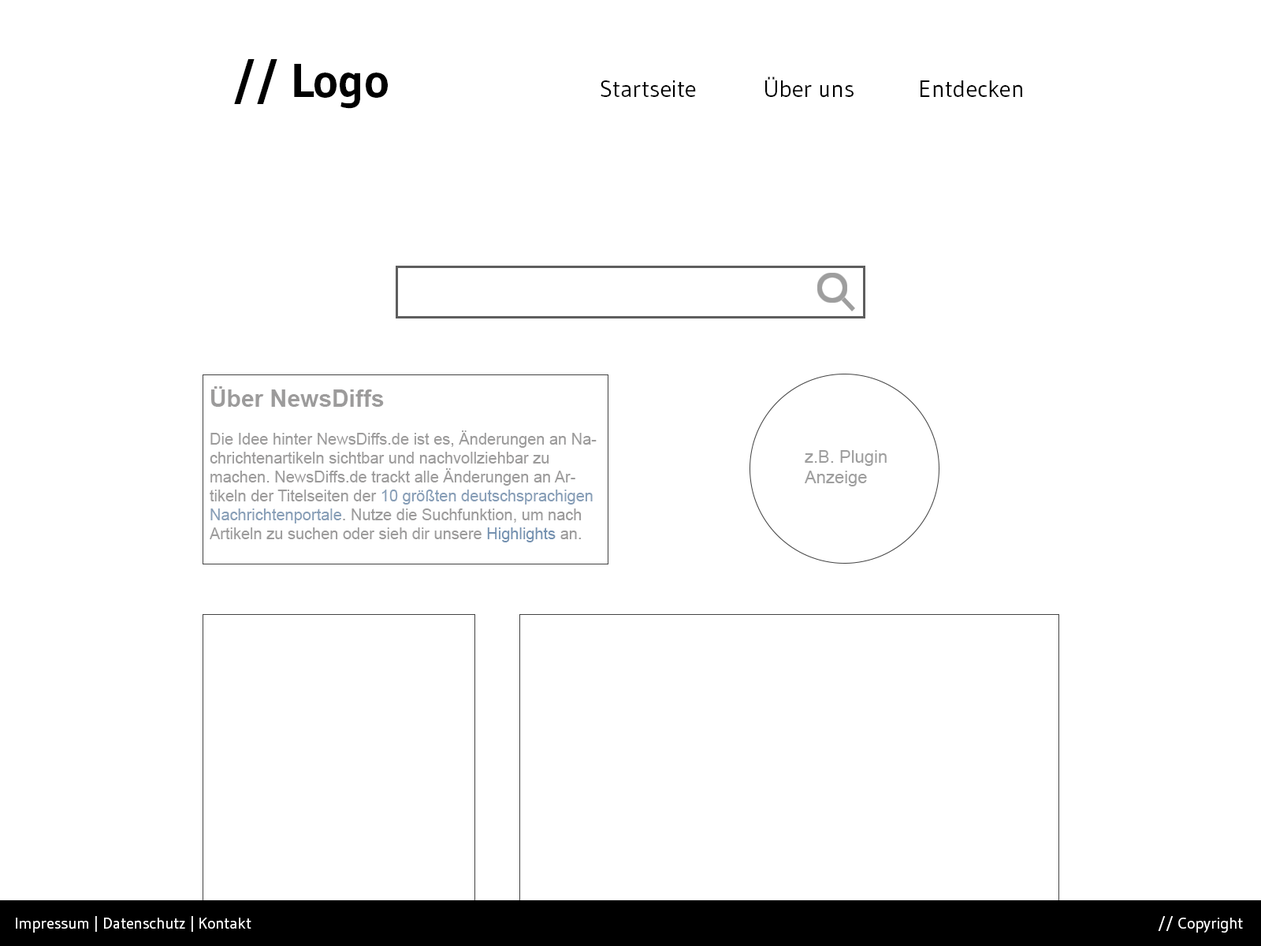
<style>
.page{position:relative;width:1261px;height:946px;background:#ffffff}
.page>*{position:absolute;margin:0}
.t1{font:47.3px "Gudea-Bold";color:#000000}
.t2{font:23.6px "Gudea";color:#000000}
.t3{font:15.8px "ArialMT";color:#9c9b9b}
.t4{font:23.6px "Arial-BoldMT";color:#9c9b9b}
.t5{font:15.8px "ArialMT";color:#879eb7}
.t6{font:15.8px "ArialMT";color:#7592b1}
.t7{font:17.3px "ArialMT";color:#9e9e9e}
.t8{font:15.8px "Gudea";color:#ffffff}
</style>
<div class="page">
<p class="t1" style="left:234px;top:59px;width:154px;height:50px">// Logo</p>
<p class="t2" style="left:765px;top:76px;width:88px;height:22px">Über uns</p>
<p class="t2" style="left:601px;top:80px;width:95px;height:17px">Startseite</p>
<p class="t2" style="left:920px;top:80px;width:102px;height:17px">Entdecken</p>
<p class="t3" style="left:210px;top:386px;width:387px;height:156px"><span class="t4">Über NewsDiffs<br><br></span>Die Idee hinter NewsDiffs.de ist es, Änderungen an Nachrichtenartikeln sichtbar und nachvollziehbar zu machen. NewsDiffs.de trackt alle Änderungen an Artikeln der Titelseiten der <span class="t5">10 größten deutschsprachigen Nachrichtenportale</span>. Nutze die Suchfunktion, um nach Artikeln zu suchen oder sieh dir unsere <span class="t6">Highlights </span>an.</p>
<p class="t7" style="left:805px;top:450px;width:82px;height:36px">z.B. Plugin<br>Anzeige</p>
<p class="t8" style="left:16px;top:916px;width:235px;height:16px">Impressum | Datenschutz | Kontakt</p>
<p class="t8" style="left:1158px;top:916px;width:85px;height:16px">// Copyright</p>
</div>
